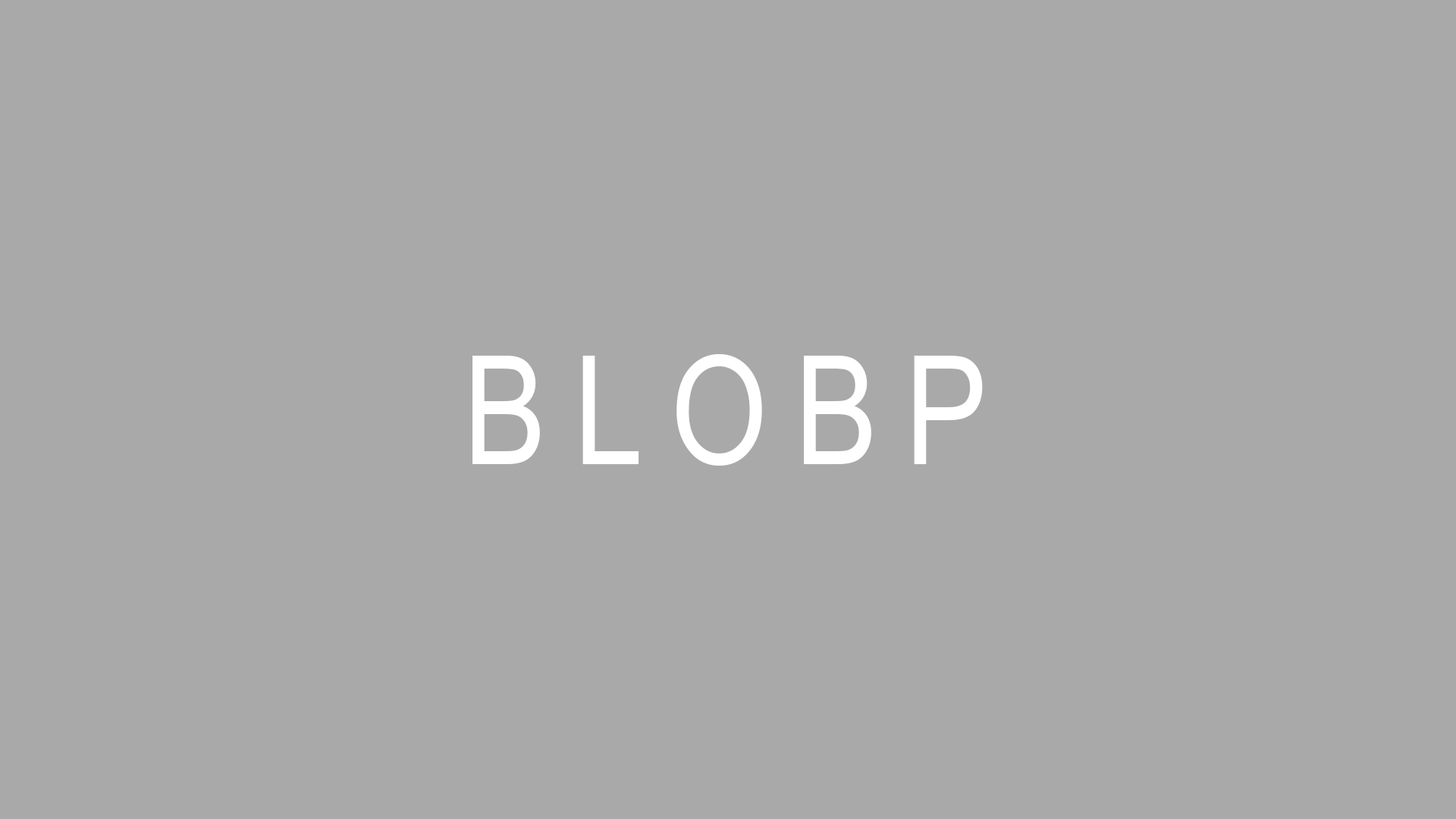
<style>
.page{position:relative;width:1456px;height:819px;background:#a9a9a9}
.page>*{position:absolute;margin:0}
.t1{font:151.7px "ArialNarrow";letter-spacing:0.18em;color:#ffffff}
</style>
<div class="page">
<p class="t1" style="left:472px;top:354px;width:511px;height:112px">BLOBP</p>
</div>
